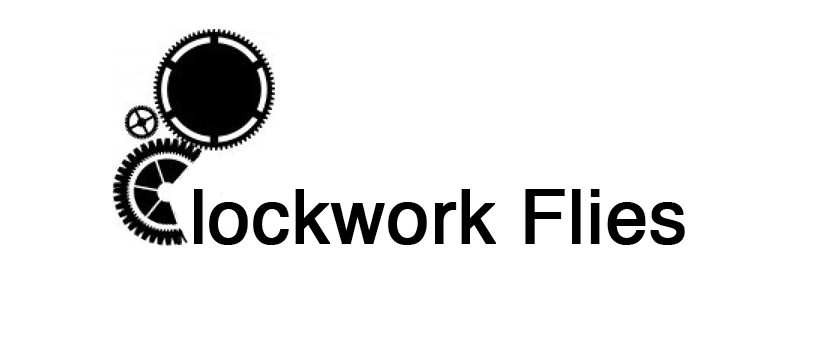
<style>
.page{position:relative;width:827px;height:354px;background:#ffffff}
.page>*{position:absolute;margin:0}
.t1{font:75px "Helvetica";color:#000000;font-weight:bold}
</style>
<div class="page">
<p class="t1" style="left:194px;top:189px;width:491px;height:56px">lockwork Flies</p>
</div>
